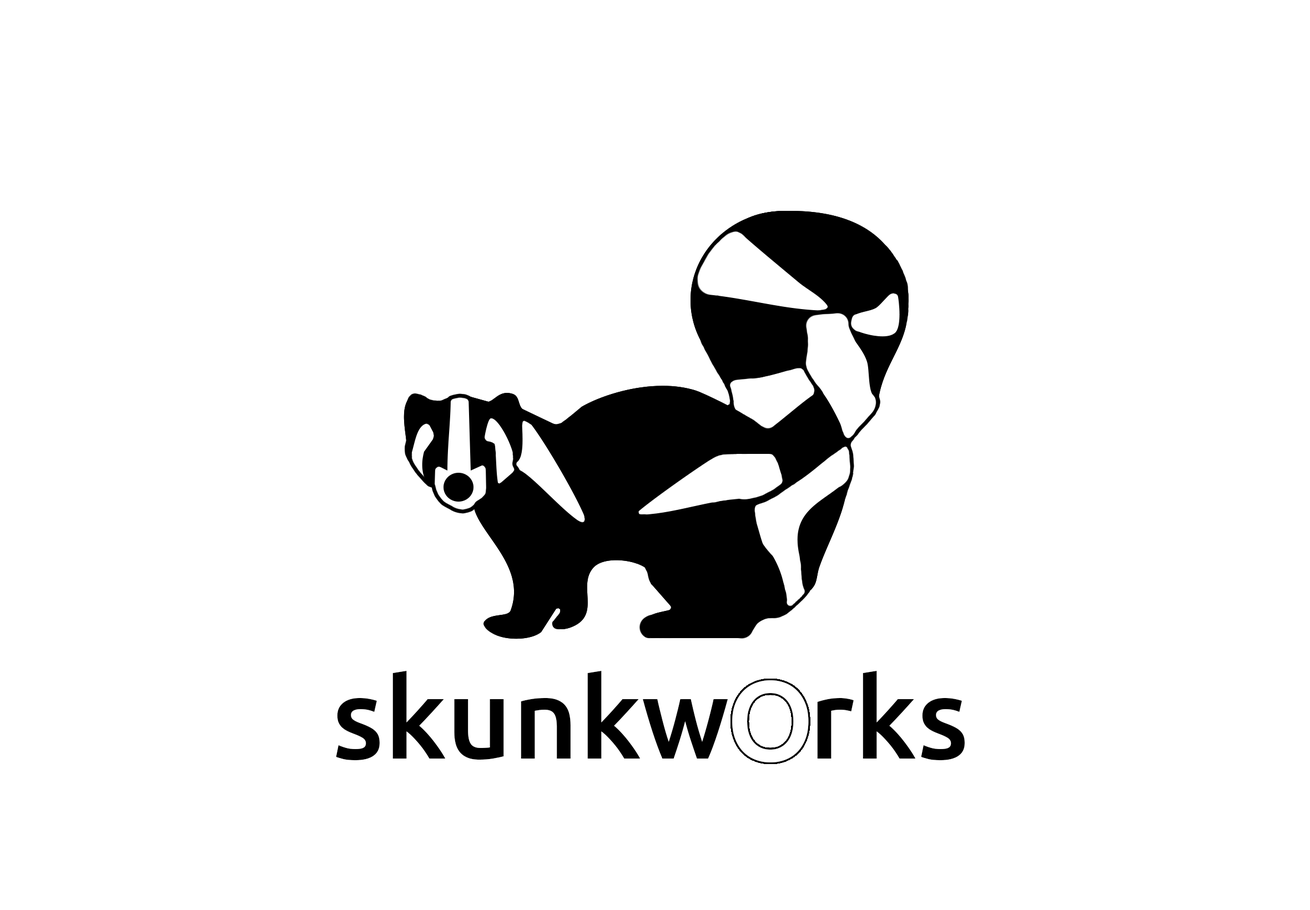
<style>
.page{position:relative;width:1310px;height:910px;background:#ffffff}
.page>*{position:absolute;margin:0}
.t1{font:113.3px "Ubuntu-Medium";color:#000000}
</style>
<div class="page">
<p class="t1" style="left:336px;top:671px;width:629px;height:89px">skunkw   rks</p>
<p class="t1" style="left:336px;top:671px;width:629px;height:89px">skunkw   rks</p>
</div>
